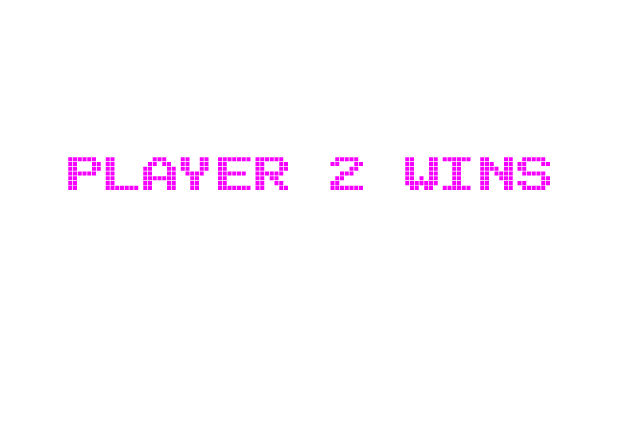
<style>
.page{position:relative;width:637px;height:432px;background:#ffffff}
.page>*{position:absolute;margin:0}
.t1{font:72px "Arcade";color:#f800ff}
</style>
<div class="page">
<p class="t1" style="left:68px;top:157px;width:482px;height:33px">PLAYER 2 WINS</p>
</div>
